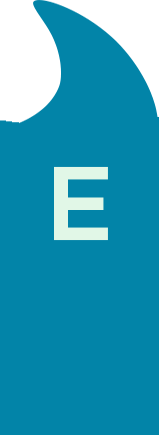
<style>
.page{position:relative;width:159px;height:435px;background:#0284a8}
.page>*{position:absolute;margin:0}
.t1{font:100px "FONTSPRINGDEMO-GeometosNeueBoldRegular";color:#e1f7e7}
</style>
<div class="page">
<p class="t1" style="left:54px;top:166px;width:54px;height:75px">E</p>
</div>
